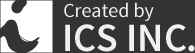
<style>
.page{position:relative;width:195px;height:53px;background:#333333}
.page>*{position:absolute;margin:0}
.t1{font:20px "SourceSansPro-Regular";color:#f0f0f0}
.t2{font:40px "SourceSansPro-Semibold";color:#f0f0f0}
</style>
<div class="page">
<p class="t1" style="left:64px;top:2px;width:90px;height:19px">Created by</p>
<p class="t2" style="left:65px;top:24px;width:130px;height:28px">ICS INC.</p>
</div>
